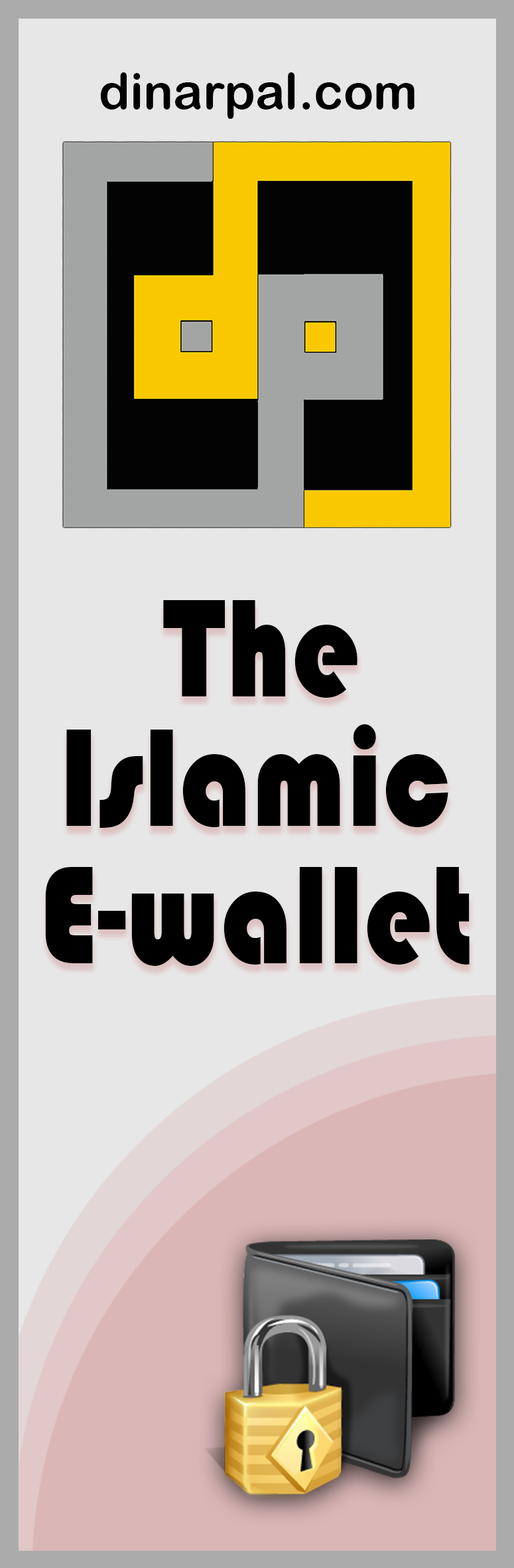
<style>
.page{position:relative;width:514px;height:1568px;background:#e7e7e7}
.page>*{position:absolute;margin:0}
.t1{font:49.8px "ArialRoundedMTBold";color:#000000}
.t2{font:144.9px "Bauhaus93";color:#000000;scale:0.85 1}
</style>
<div class="page">
<p class="t1" style="left:100px;top:72px;width:315px;height:47px">dinarpal.com</p>
<p class="t2" style="left:163px;top:600px;width:195px;height:98px">The</p>
<p class="t2" style="left:66px;top:724px;width:383px;height:104px">Islamic</p>
<p class="t2" style="left:45px;top:867px;width:425px;height:99px">E-wallet</p>
</div>
